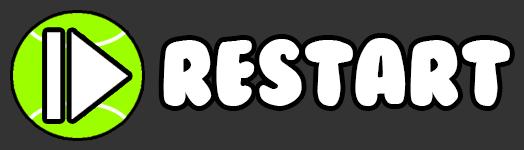
<style>
.page{position:relative;width:524px;height:150px;background:#333333}
.page>*{position:absolute;margin:0}
.t1{font:85px "BubbleGum";color:#ffffff}
</style>
<div class="page">
<p class="t1" style="left:163px;top:38px;width:347px;height:68px">Restart</p>
</div>
